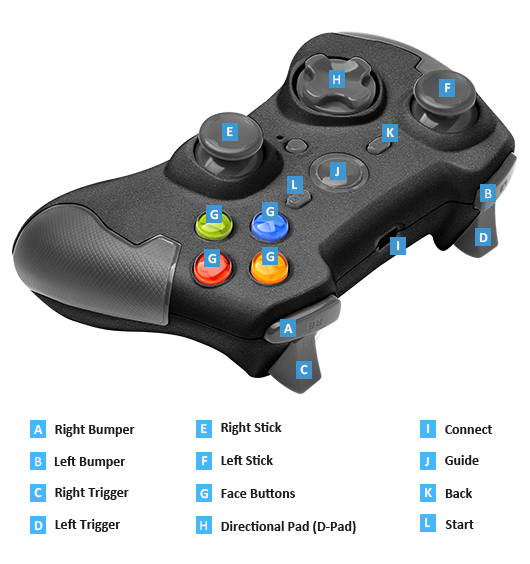
<style>
.page{position:relative;width:530px;height:564px;background:#ffffff}
.page>*{position:absolute;margin:0}
.t1{font:14px "Calibri";color:#ffffff}
.t2{font:14px "Calibri-Bold";color:#ffffff}
.t3{font:14px "Calibri-Bold";color:#fcfbfa}
.t4{font:14px "Calibri-Bold";color:#fdfdfc}
.t5{font:14px "Calibri-Bold";color:#1d1c1a}
</style>
<div class="page">
<p class="t1" style="left:333px;top:74px;width:7px;height:11px">H</p>
<p class="t2" style="left:445px;top:83px;width:6px;height:10px">F</p>
<p class="t2" style="left:227px;top:127px;width:6px;height:10px">E</p>
<p class="t2" style="left:387px;top:128px;width:7px;height:10px">K</p>
<p class="t3" style="left:335px;top:167px;width:4px;height:10px">J</p>
<p class="t2" style="left:292px;top:180px;width:6px;height:10px">L</p>
<p class="t1" style="left:485px;top:189px;width:7px;height:10px">B</p>
<p class="t4" style="left:210px;top:209px;width:9px;height:11px">G</p>
<p class="t4" style="left:266px;top:206px;width:9px;height:11px">G</p>
<p class="t3" style="left:479px;top:233px;width:9px;height:10px">D</p>
<p class="t2" style="left:397px;top:241px;width:3px;height:10px">I</p>
<p class="t4" style="left:208px;top:253px;width:9px;height:11px">G</p>
<p class="t4" style="left:266px;top:251px;width:9px;height:11px">G</p>
<p class="t4" style="left:284px;top:323px;width:9px;height:11px">A</p>
<p class="t2" style="left:300px;top:364px;width:8px;height:11px">C</p>
<p class="t4" style="left:34px;top:424px;width:9px;height:11px">A</p>
<p class="t5" style="left:55px;top:424px;width:80px;height:13px">Right Bumper</p>
<p class="t2" style="left:201px;top:424px;width:6px;height:10px">E</p>
<p class="t5" style="left:221px;top:422px;width:61px;height:13px">Right Stick</p>
<p class="t2" style="left:427px;top:424px;width:3px;height:10px">I</p>
<p class="t5" style="left:445px;top:425px;width:48px;height:9px">Connect</p>
<p class="t1" style="left:35px;top:457px;width:7px;height:10px">B</p>
<p class="t5" style="left:54px;top:456px;width:72px;height:13px">Left Bumper</p>
<p class="t2" style="left:202px;top:456px;width:6px;height:10px">F</p>
<p class="t5" style="left:221px;top:455px;width:52px;height:10px">Left Stick</p>
<p class="t3" style="left:425px;top:457px;width:4px;height:10px">J</p>
<p class="t5" style="left:445px;top:455px;width:34px;height:10px">Guide</p>
<p class="t2" style="left:34px;top:487px;width:8px;height:11px">C</p>
<p class="t5" style="left:55px;top:487px;width:74px;height:13px">Right Trigger</p>
<p class="t4" style="left:200px;top:488px;width:9px;height:11px">G</p>
<p class="t5" style="left:221px;top:489px;width:74px;height:9px">Face Buttons</p>
<p class="t2" style="left:425px;top:488px;width:7px;height:10px">K</p>
<p class="t5" style="left:445px;top:488px;width:27px;height:10px">Back</p>
<p class="t3" style="left:34px;top:521px;width:9px;height:10px">D</p>
<p class="t5" style="left:55px;top:519px;width:66px;height:13px">Left Trigger</p>
<p class="t1" style="left:200px;top:520px;width:7px;height:11px">H</p>
<p class="t5" style="left:221px;top:521px;width:135px;height:13px">Directional Pad (D-Pad)</p>
<p class="t2" style="left:425px;top:518px;width:6px;height:10px">L</p>
<p class="t5" style="left:445px;top:520px;width:29px;height:9px">Start</p>
</div>
